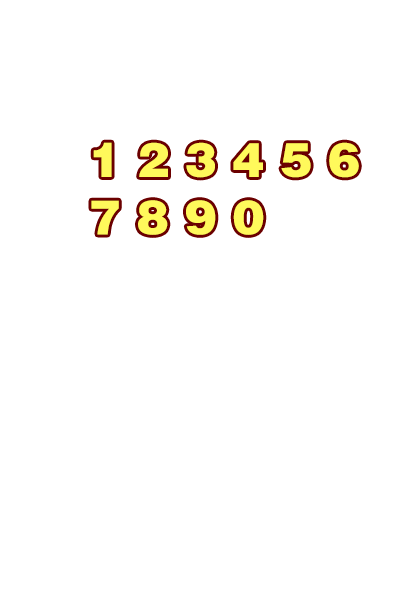
<style>
.page{position:relative;width:414px;height:598px;background:#ffffff}
.page>*{position:absolute;margin:0}
.t1{font:48px "FZCCHJW--GB1-0";color:#fff95b}
</style>
<div class="page">
<p class="t1" style="left:91px;top:142px;width:268px;height:93px">1 2 3 4 5 6 <br>7 8 9 0</p>
</div>
